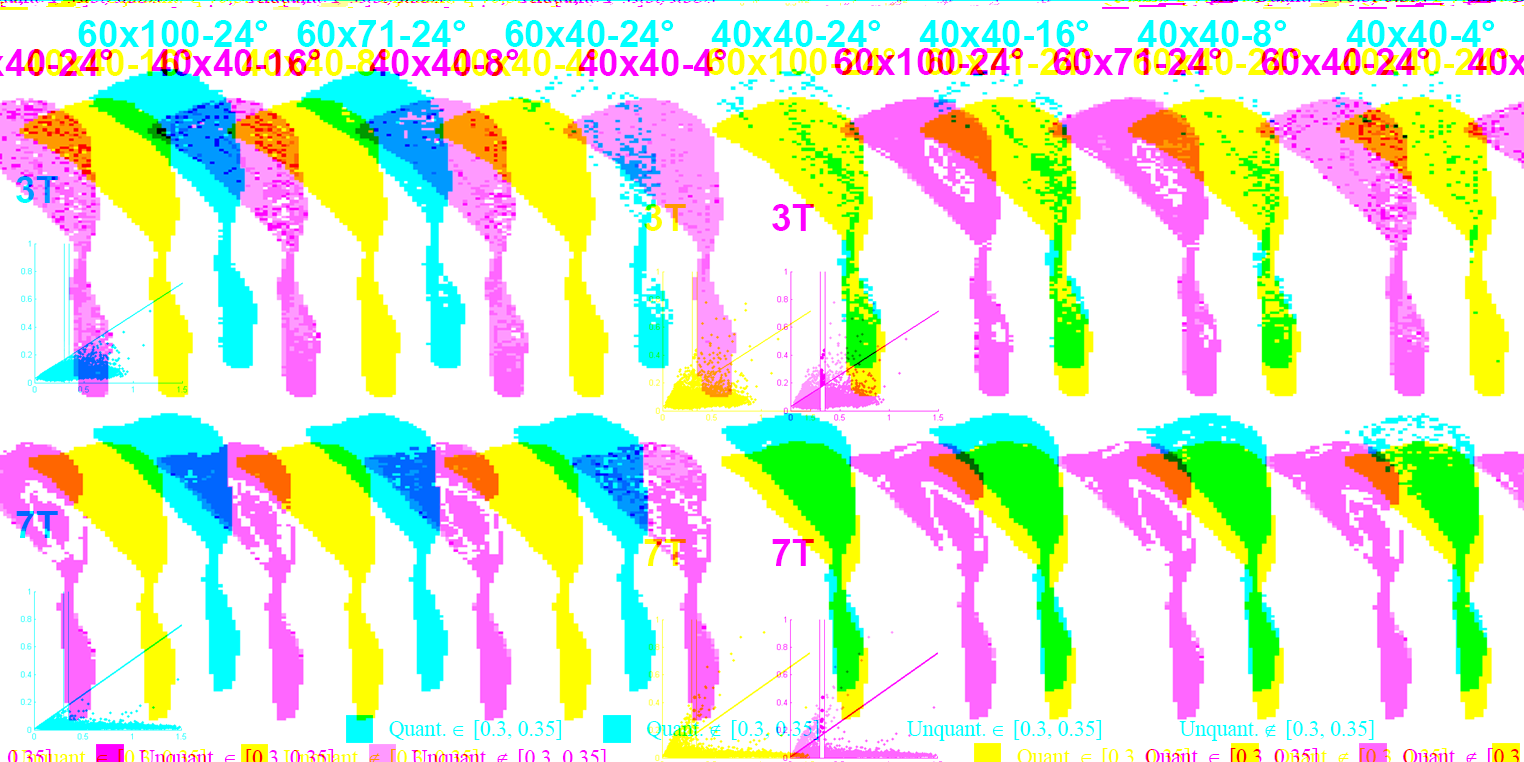
<style>
.page{position:relative;width:1524px;height:762px;background:#ffffff}
.page>*{position:absolute;margin:0}
.t1{font:36.9px "Arial-BoldMT";color:#00ffff}
.t2{font:36.9px "Arial-BoldMT"}
.t3{font:21.6px "TimesNewRomanPSMT"}
.t4{font:21.6px "Symbol"}
</style>
<div class="page">
<p class="t1" style="left:78px;top:19px;width:190px;height:27px">60x100-24°</p>
<p class="t1" style="left:297px;top:19px;width:169px;height:27px">60x71-24°</p>
<p class="t1" style="left:505px;top:19px;width:169px;height:27px">60x40-24°</p>
<p class="t1" style="left:711px;top:19px;width:170px;height:27px">40x40-24°</p>
<p class="t1" style="left:919px;top:19px;width:170px;height:27px">40x40-16°</p>
<p class="t1" style="left:1137px;top:19px;width:150px;height:27px">40x40-8°</p>
<p class="t1" style="left:1346px;top:19px;width:149px;height:27px">40x40-4°</p>
<p class="t2" style="left:16px;top:175px;width:42px;height:27px">3T</p>
<p class="t2" style="left:16px;top:510px;width:42px;height:27px">7T</p>
<p class="t3" style="left:389px;top:719px;width:173px;height:20px">Quant. <span class="t4">∈ </span>[0.3, 0.35]</p>
<p class="t3" style="left:646px;top:719px;width:173px;height:20px">Quant. <span class="t4">∉ </span>[0.3, 0.35]</p>
<p class="t3" style="left:907px;top:719px;width:195px;height:21px">Unquant. <span class="t4">∈ </span>[0.3, 0.35]</p>
<p class="t3" style="left:1179px;top:719px;width:195px;height:21px">Unquant. <span class="t4">∉ </span>[0.3, 0.35]</p>
</div>
